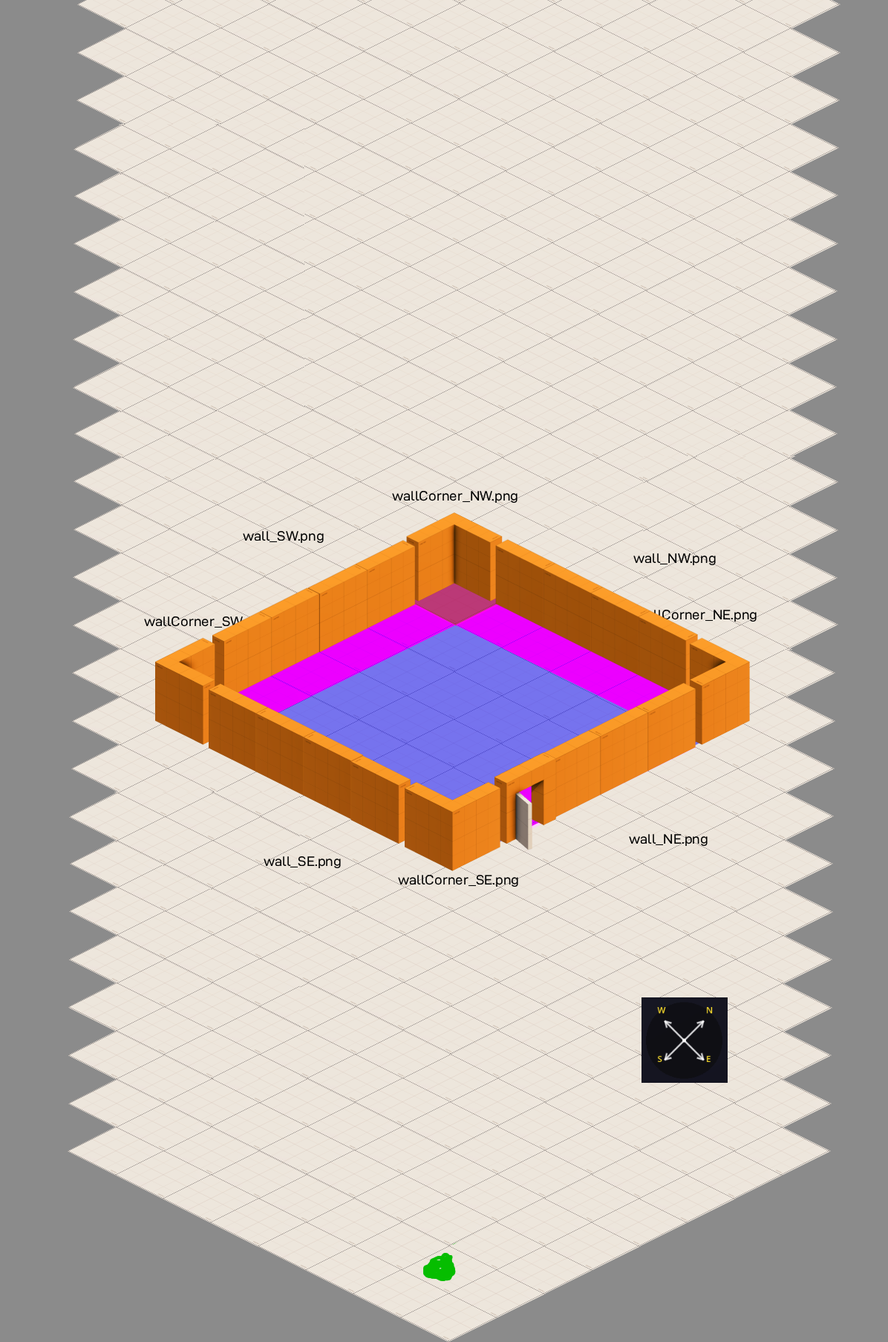
<style>
.page{position:relative;width:888px;height:1342px;background:#ede6dc}
.page>*{position:absolute;margin:0}
.t1{font:13.8px "D-DINExp";color:#000000}
</style>
<div class="page">
<p class="t1" style="left:392px;top:490px;width:126px;height:14px">wallCorner_NW.png</p>
<p class="t1" style="left:243px;top:531px;width:81px;height:13px">wall_SW.png</p>
<p class="t1" style="left:634px;top:553px;width:82px;height:13px">wall_NW.png</p>
<p class="t1" style="left:144px;top:616px;width:124px;height:13px">wallCorner_SW.png</p>
<p class="t1" style="left:635px;top:609px;width:122px;height:13px">wallCorner_NE.png</p>
<p class="t1" style="left:629px;top:834px;width:79px;height:13px">wall_NE.png</p>
<p class="t1" style="left:264px;top:856px;width:77px;height:13px">wall_SE.png</p>
<p class="t1" style="left:398px;top:874px;width:120px;height:14px">wallCorner_SE.png</p>
</div>
